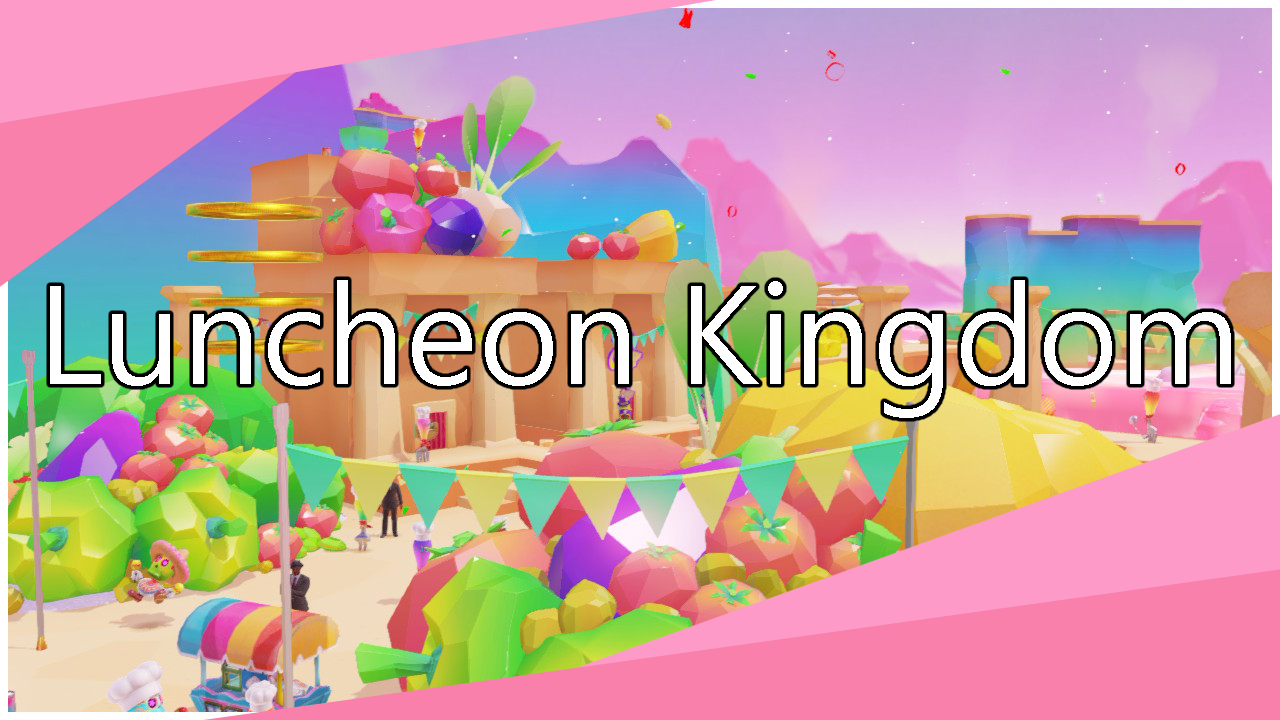
<style>
.page{position:relative;width:1280px;height:720px}
.page>*{position:absolute;margin:0}
.t1{font:140px "SegoeUI";color:#ffffff}
</style>
<div class="page">
<p class="t1" style="left:50px;top:280px;width:1181px;height:138px">Luncheon Kingdom</p>
</div>
